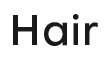
<style>
.page{position:relative;width:109px;height:66px;background:#ffffff}
.page>*{position:absolute;margin:0}
.t1{font:43px "Objectivity-Medium";color:#1a1a1a}
</style>
<div class="page">
<p class="t1" style="left:13px;top:14px;width:85px;height:32px">Hair</p>
</div>
